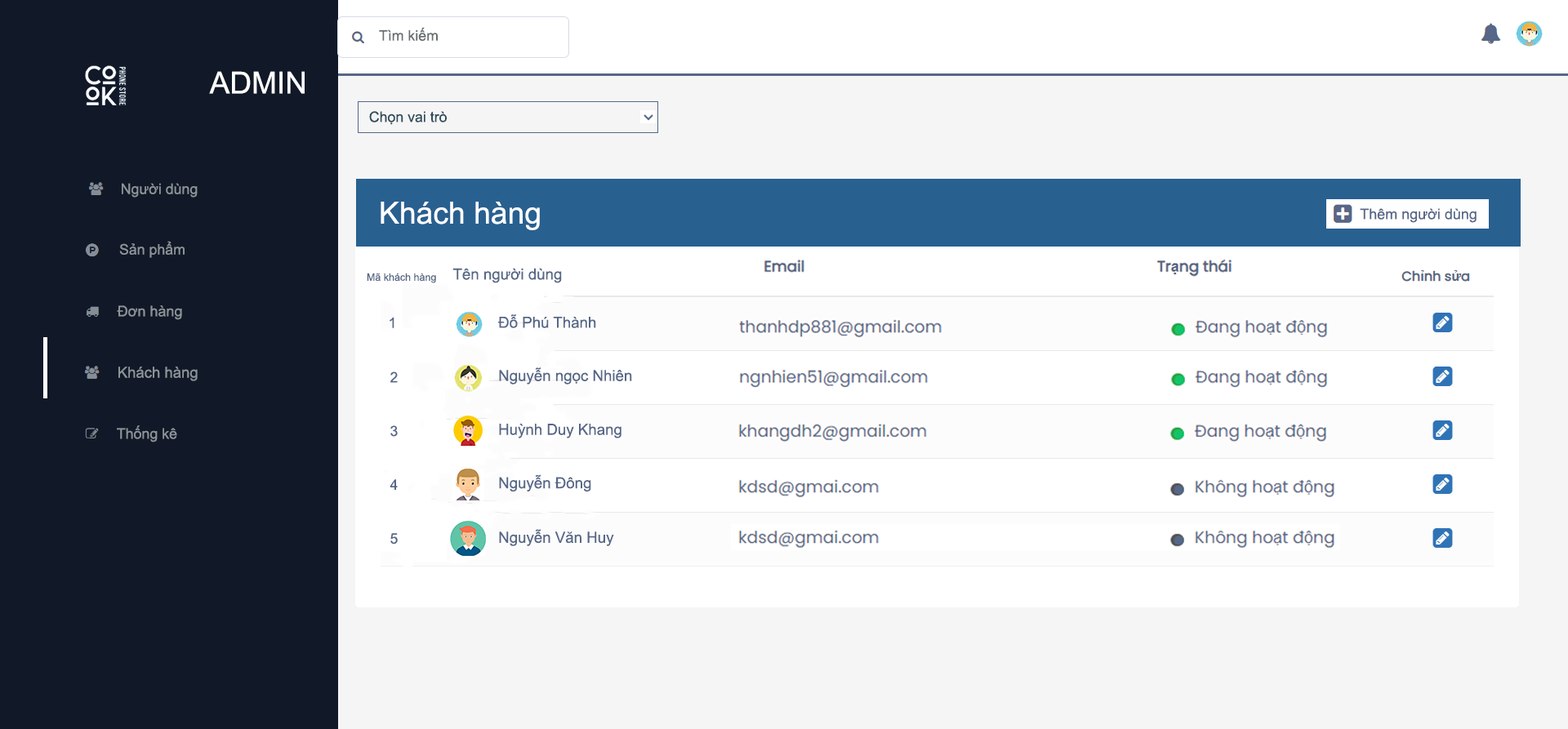
<style>
.page{position:relative;width:1568px;height:729px;background:#ffffff}
.page>*{position:absolute;margin:0}
.t1{font:14.5px "ArialMT";color:#686e71}
.t2{font:30.3px "ArialMT";color:#ffffff}
.t3{font:14.5px "ArialMT";color:#2e4b5b}
.t4{font:14.5px "ArialMT";color:#8c9499}
.t5{font:30.5px "ArialMT";color:#ffffff}
.t6{font:14.7px "ArialMT";color:#566787}
.t7{font:15.3px "ArialMT";color:#566787}
.t8{font:10.2px "ArialMT";color:#566787}
.t9{font:14.7px "ArialMT";color:#8c9499}
.t10{font:14.3px "ArialMT";color:#566787}
.t11{font:15.1px "ArialMT";color:#8c9499}
</style>
<div class="page">
<p class="t1" style="left:379px;top:27px;width:59px;height:14px">Tìm kiếm</p>
<p class="t2" style="left:209px;top:71px;width:96px;height:23px">ADMIN</p>
<p class="t3" style="left:369px;top:111px;width:78px;height:14px">Chọn vai trò</p>
<p class="t4" style="left:122px;top:183px;width:76px;height:15px">Người dùng</p>
<p class="t5" style="left:381px;top:202px;width:159px;height:28px">Khách hàng</p>
<p class="t6" style="left:1360px;top:208px;width:117px;height:15px">Thêm người dùng</p>
<p class="t4" style="left:119px;top:241px;width:66px;height:17px">Sản phẩm</p>
<p class="t7" style="left:452px;top:268px;width:110px;height:15px">Tên người dùng</p>
<p class="t8" style="left:367px;top:273px;width:69px;height:10px">Mã khách hàng</p>
<p class="t9" style="left:117px;top:305px;width:65px;height:15px">Đơn hàng</p>
<p class="t10" style="left:390px;top:317px;width:4px;height:11px">1</p>
<p class="t7" style="left:498px;top:314px;width:98px;height:14px">Đỗ Phú Thành</p>
<p class="t11" style="left:118px;top:367px;width:80px;height:14px">Khách hàng</p>
<p class="t10" style="left:390px;top:372px;width:8px;height:11px">2</p>
<p class="t7" style="left:499px;top:368px;width:133px;height:17px">Nguyễn ngọc Nhiên</p>
<p class="t4" style="left:117px;top:425px;width:60px;height:18px">Thống kê</p>
<p class="t10" style="left:390px;top:425px;width:8px;height:12px">3</p>
<p class="t7" style="left:499px;top:424px;width:122px;height:15px">Huỳnh Duy Khang</p>
<p class="t10" style="left:390px;top:479px;width:8px;height:11px">4</p>
<p class="t7" style="left:499px;top:474px;width:92px;height:18px">Nguyễn Đông</p>
<p class="t10" style="left:390px;top:533px;width:8px;height:12px">5</p>
<p class="t7" style="left:499px;top:529px;width:115px;height:17px">Nguyễn Văn Huy</p>
</div>
